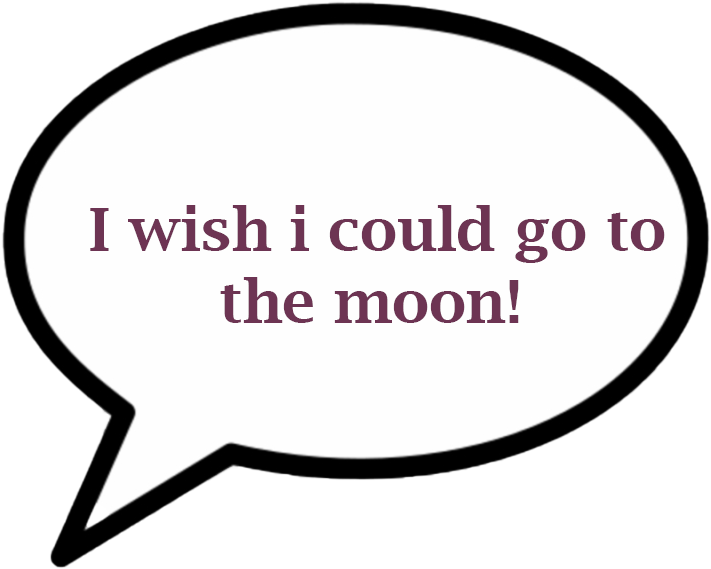
<style>
.page{position:relative;width:711px;height:569px;background:#fefefe}
.page>*{position:absolute;margin:0}
.t1{font:60px "LucidaBright-Demi";color:#6d3453}
</style>
<div class="page">
<p class="t1" style="left:90px;top:205px;width:575px;height:118px">I wish i could go to <br>       the moon!</p>
</div>
